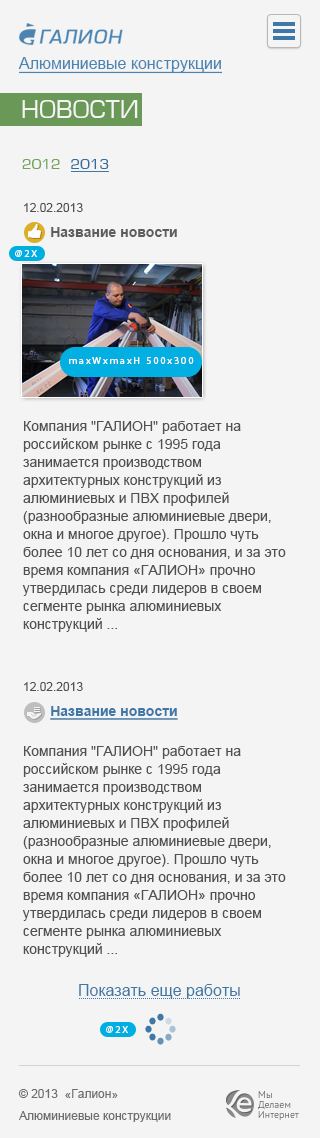
<style>
.page{position:relative;width:320px;height:1138px;background:#f4f4f4}
.page>*{position:absolute;margin:0}
.t1{font:16px "ArialMT";color:#4a84b2;text-decoration:underline}
.t2{font:24px "EuropeNormal";color:#f4f4f4;text-transform:uppercase}
.t3{font:14px "EuropeNormal";color:#70a559;text-transform:uppercase}
.t4{font:14px "EuropeNormal";color:#346c9b;text-transform:uppercase}
.t5{font:14px/18px "ArialMT";color:#515151}
.t6{font:12px/22px "ArialMT";color:#515151}
.t7{font:14px/25px "Arial-BoldMT";color:#5f5e5e}
.t8{font:10.1px "MyriadPro-Regular";letter-spacing:0.18em;color:#ffffff;text-transform:uppercase}
.t9{font:14px/25px "Arial-BoldMT";color:#3f78a7;text-decoration:underline}
.t10{font:16px "ArialMT";color:#3f78a7}
.t11{font:12px/22px "ArialMT";color:#6d6d6d}
.t12{font:12px/14px "ArialMT";color:#6d6d6d}
.t13{font:10px/10px "PTSans-Regular";color:#636363}
</style>
<div class="page">
<p class="t1" style="left:18px;top:57px;width:204px;height:17px">Алюминиевые конструкции</p>
<p class="t2" style="left:22px;top:100px;width:116px;height:18px">НОВОСТИ</p>
<p class="t3" style="left:22px;top:159px;width:87px;height:10px">2012   <span class="t4">2013</span></p>
<p class="t5" style="left:22px;top:203px;width:264px;height:429px"><span class="t6">12.02.2013<br>       </span><span class="t7">Название новости<br><br><br><br><br><br><br><br><br></span>Компания "ГАЛИОН" работает на российском рынке с 1995 года занимается производством архитектурных конструкций из алюминиевых и ПВХ профилей (разнообразные алюминиевые двери, окна и многое другое). Прошло чуть более 10 лет со дня основания, и за это время компания «ГАЛИОН» прочно утвердилась среди лидеров в своем сегменте рынка алюминиевых конструкций ...</p>
<p class="t8" style="left:15px;top:250px;width:22px;height:7px">@2X</p>
<p class="t5" style="left:22px;top:682px;width:264px;height:275px"><span class="t6">12.02.2013<br>       </span><span class="t9">Название новости<br><br></span>Компания "ГАЛИОН" работает на российском рынке с 1995 года занимается производством архитектурных конструкций из алюминиевых и ПВХ профилей (разнообразные алюминиевые двери, окна и многое другое). Прошло чуть более 10 лет со дня основания, и за это время компания «ГАЛИОН» прочно утвердилась среди лидеров в своем сегменте рынка алюминиевых конструкций ...</p>
<p class="t10" style="left:79px;top:984px;width:161px;height:15px">Показать еще работы</p>
<p class="t8" style="left:106px;top:1026px;width:22px;height:7px">@2X</p>
<p class="t11" style="left:18px;top:1089px;width:153px;height:33px">© 2013  «Галион»<br>Алюминиевые <span class="t12">конструкции</span></p>
<p class="t13" style="left:258px;top:1091px;width:41px;height:29px">Мы <br>Делаем<br>Интернет</p>
</div>
